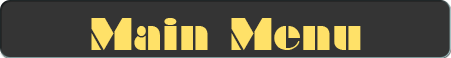
<style>
.page{position:relative;width:451px;height:58px;background:#343434}
.page>*{position:absolute;margin:0}
.t1{font:72.3px "Braggadocio";letter-spacing:0.01em;color:#ffe168;scale:0.9 1}
</style>
<div class="page">
<p class="t1" style="left:91px;top:18px;width:270px;height:32px">Main Menu</p>
</div>
